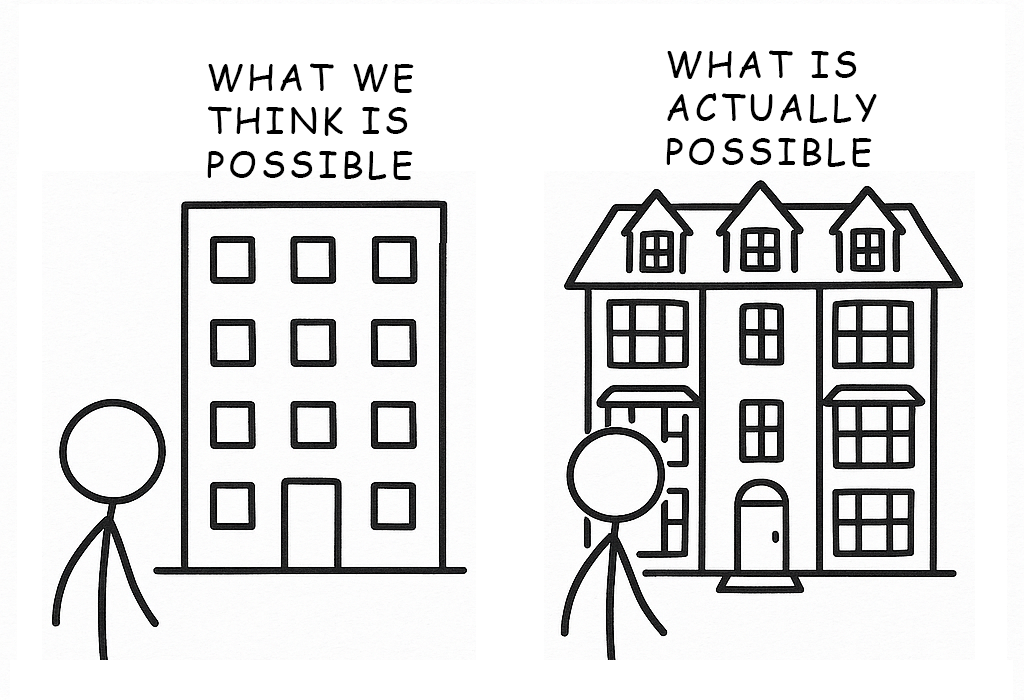
<style>
.page{position:relative;width:1024px;height:700px;background:#ffffff}
.page>*{position:absolute;margin:0}
.t1{font:36px "ComicSansMS";letter-spacing:0.1em;color:#000000}
</style>
<div class="page">
<p class="t1" style="left:666px;top:50px;width:211px;height:117px">WHAT IS<br>ACTUALLY<br>POSSIBLE</p>
<p class="t1" style="left:207px;top:63px;width:207px;height:117px">WHAT WE<br>THINK IS<br>POSSIBLE</p>
</div>
